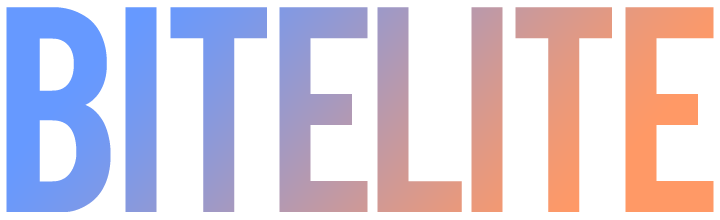
<style>
.page{position:relative;width:720px;height:220px;background:#ffffff}
.page>*{position:absolute;margin:0}
.t1{font:230px "Bebas";letter-spacing:-0.05em}
</style>
<div class="page">
<p class="t1" style="left:6px;top:7px;width:708px;height:205px">BiteLite</p>
</div>
